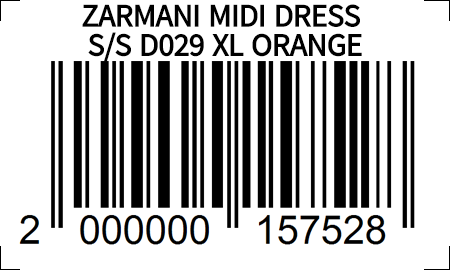
<style>
.page{position:relative;width:450px;height:270px;background:#ffffff}
.page>*{position:absolute;margin:0}
.t1{font:32.1px/29.2px "PyidaungsuBook-Bold";letter-spacing:-0.02em;color:#000000;text-transform:uppercase}
</style>
<div class="page">
<p class="t1" style="left:82px;top:4px;width:280px;height:58px;text-align:center">ZARMANI MIDI DRESS <br>S/S D029 XL ORANGE</p>
</div>
